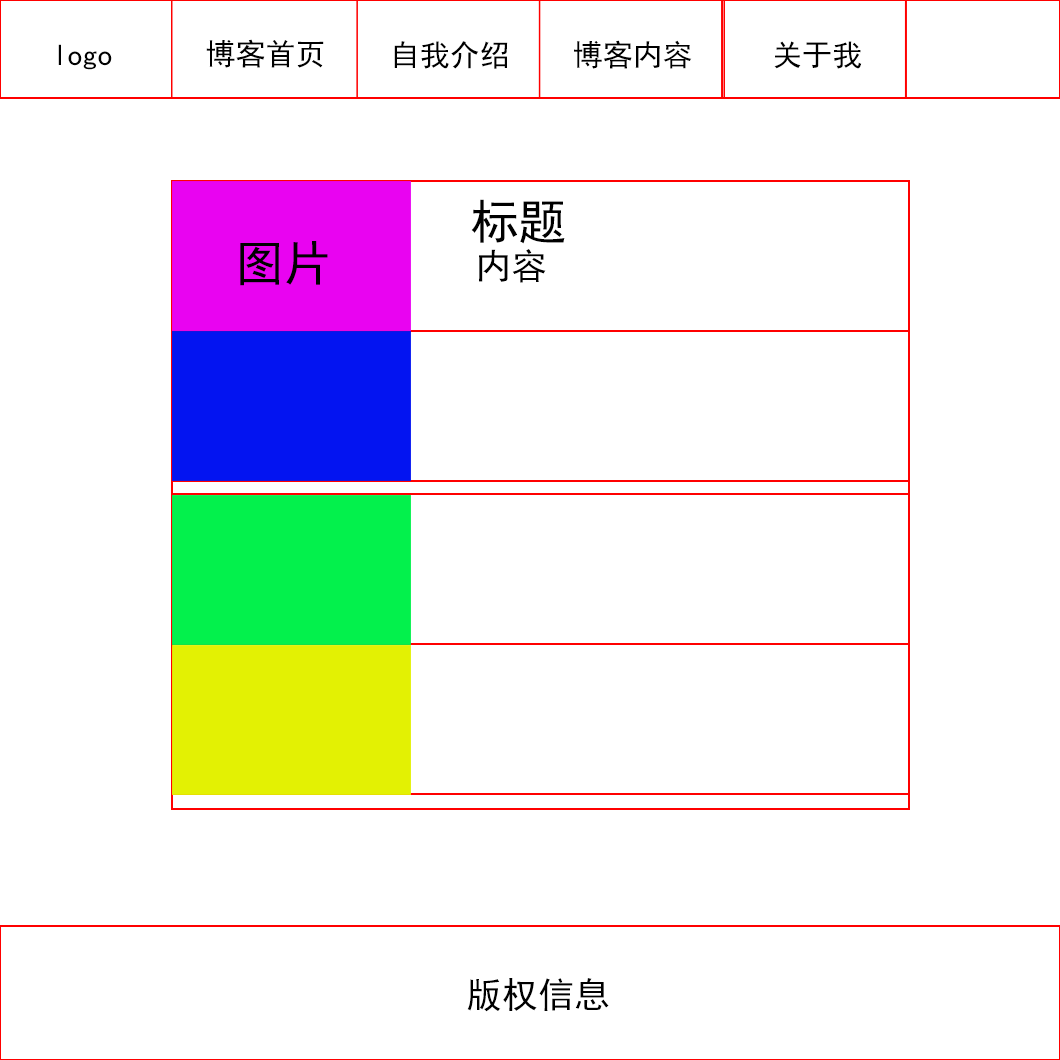
<style>
.page{position:relative;width:1060px;height:1060px;background:#ffffff}
.page>*{position:absolute;margin:0}
.t1{font:30px "SimHei";color:#000000}
.t2{font:48px "SimHei";color:#000000}
.t3{font:36px "SimHei";color:#000000}
</style>
<div class="page">
<p class="t1" style="left:206px;top:39px;width:118px;height:29px">博客首页</p>
<p class="t1" style="left:394px;top:41px;width:114px;height:28px">自我介绍</p>
<p class="t1" style="left:574px;top:40px;width:118px;height:29px">博客内容</p>
<p class="t1" style="left:774px;top:41px;width:88px;height:28px">关于我</p>
<p class="t1" style="left:58px;top:44px;width:54px;height:26px">logo</p>
<p class="t2" style="left:471px;top:199px;width:94px;height:45px">标题</p>
<p class="t2" style="left:240px;top:241px;width:88px;height:45px">图片</p>
<p class="t3" style="left:479px;top:249px;width:67px;height:34px">内容</p>
<p class="t3" style="left:467px;top:978px;width:142px;height:34px">版权信息</p>
</div>
